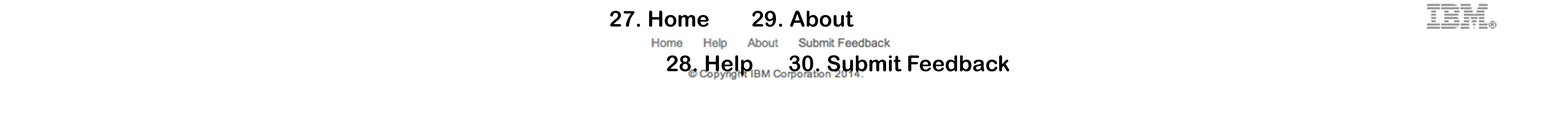
<style>
.page{position:relative;width:1568px;height:115px;background:#ffffff}
.page>*{position:absolute;margin:0}
.t1{font:21.9px "ArialRoundedMTBold";color:#000000}
</style>
<div class="page">
<p class="t1" style="left:610px;top:11px;width:99px;height:16px">27. Home</p>
<p class="t1" style="left:752px;top:11px;width:102px;height:16px">29. About</p>
<p class="t1" style="left:667px;top:55px;width:86px;height:21px">28. Help</p>
<p class="t1" style="left:789px;top:55px;width:220px;height:16px">30. Submit Feedback</p>
</div>
